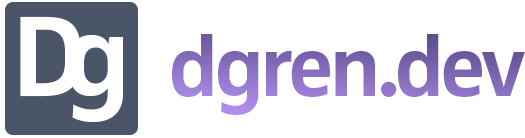
<style>
.page{position:relative;width:525px;height:138px;background:#ffffff}
.page>*{position:absolute;margin:0}
.t1{font:118px "ZwoCorrPro-Bold";letter-spacing:-0.22em;color:#ffffff}
.t2{font:88px "ZwoCorrPro-Bold";letter-spacing:-0.08em}
</style>
<div class="page">
<p class="t1" style="left:20px;top:16px;width:103px;height:107px">Dg</p>
<p class="t2" style="left:172px;top:34px;width:353px;height:81px">dgren.dev</p>
</div>
